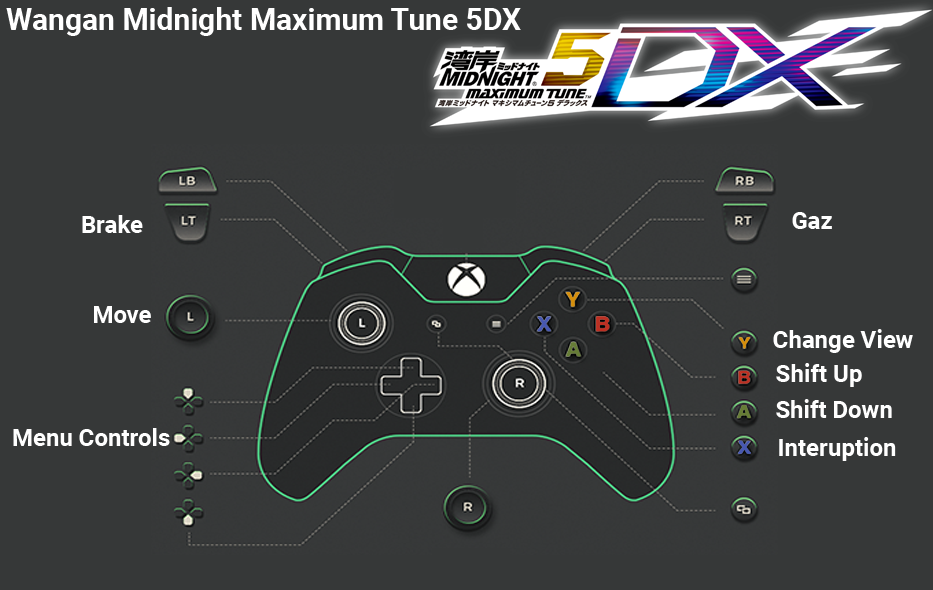
<style>
.page{position:relative;width:933px;height:590px;background:#363838}
.page>*{position:absolute;margin:0}
.t1{font:30px "Roboto-Bold";color:#ffffff}
.t2{font:24px "Roboto-Bold";color:#ffffff}
</style>
<div class="page">
<p class="t1" style="left:6px;top:7px;width:515px;height:29px">Wangan Midnight Maximum Tune 5DX</p>
<p class="t2" style="left:82px;top:215px;width:61px;height:18px">Brake</p>
<p class="t2" style="left:792px;top:212px;width:40px;height:17px">Gaz</p>
<p class="t2" style="left:94px;top:306px;width:57px;height:17px">Move</p>
<p class="t2" style="left:773px;top:329px;width:140px;height:24px">Change View</p>
<p class="t2" style="left:776px;top:363px;width:86px;height:24px">Shift Up</p>
<p class="t2" style="left:776px;top:399px;width:116px;height:19px">Shift Down</p>
<p class="t2" style="left:13px;top:428px;width:157px;height:18px">Menu Controls</p>
<p class="t2" style="left:779px;top:437px;width:117px;height:24px">Interuption</p>
</div>
